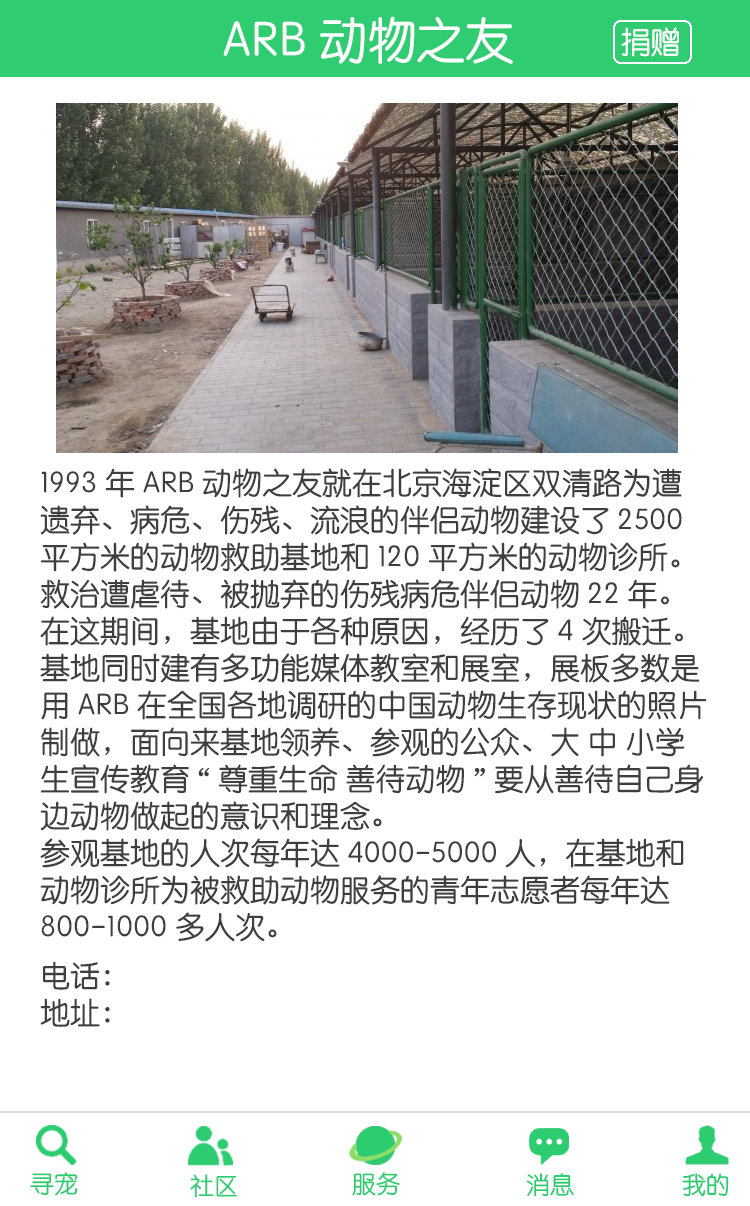
<style>
.page{position:relative;width:750px;height:1206px;background:#ffffff}
.page>*{position:absolute;margin:0}
.t1{font:48.7px "STYuanti-SC-Regular";color:#ffffff}
.t2{font:30px "STYuanti-SC-Regular";color:#ffffff}
.t3{font:30px/37px "STYuanti-SC-Regular";color:#3e3e3e}
.t4{font:24px "STYuanti-SC-Regular";color:#2ecc71}
.t5{font:24px "STYuanti-SC-Regular"}
</style>
<div class="page">
<p class="t1" style="left:223px;top:16px;width:290px;height:48px">ARB动物之友</p>
<p class="t2" style="left:621px;top:27px;width:58px;height:30px">捐赠</p>
<p class="t3" style="left:40px;top:468px;width:667px;height:474px">1993年ARB动物之友就在北京海淀区双清路为遭遗弃、病危、伤残、流浪的伴侣动物建设了2500平方米的动物救助基地和120平方米的动物诊所。救治遭虐待、被抛弃的伤残病危伴侣动物22年。在这期间，基地由于各种原因，经历了4次搬迁。<br>基地同时建有多功能媒体教室和展室，展板多数是用ARB在全国各地调研的中国动物生存现状的照片制做，面向来基地领养、参观的公众、大 中 小学生宣传教育“尊重生命 善待动物”要从善待自己身边动物做起的意识和理念。<br>参观基地的人次每年达4000-5000人，在基地和动物诊所为被救助动物服务的青年志愿者每年达800-1000多人次。</p>
<p class="t3" style="left:40px;top:961px;width:70px;height:66px">电话：<br>地址：</p>
<p class="t4" style="left:30px;top:1172px;width:48px;height:24px">寻宠</p>
<p class="t4" style="left:190px;top:1174px;width:47px;height:24px">社区</p>
<p class="t5" style="left:352px;top:1173px;width:48px;height:24px">服务</p>
<p class="t4" style="left:352px;top:1172px;width:48px;height:24px">服务</p>
<p class="t5" style="left:526px;top:1173px;width:47px;height:24px">消息</p>
<p class="t4" style="left:527px;top:1173px;width:47px;height:24px">消息</p>
<p class="t4" style="left:682px;top:1173px;width:47px;height:24px">我的</p>
<p class="t4" style="left:682px;top:1173px;width:47px;height:24px">我的</p>
</div>
